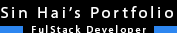
<style>
.page{position:relative;width:177px;height:33px;background:#000000}
.page>*{position:absolute;margin:0}
.t1{font:16px "MyriadPro-Regular";letter-spacing:0.2em;color:#ffffff}
.t2{font:10px "MyriadPro-Regular";letter-spacing:0.2em;color:#ffffff}
</style>
<div class="page">
<p class="t1" style="left:1px;top:6px;width:172px;height:12px">Sin Hai’s Portfolio</p>
<p class="t2" style="left:32px;top:25px;width:114px;height:10px">FulStack Developer</p>
</div>
